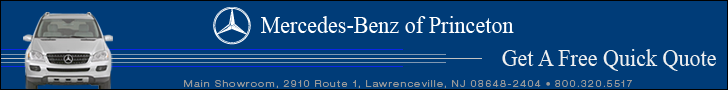
<style>
.page{position:relative;width:728px;height:90px;background:#003c78}
.page>*{position:absolute;margin:0}
.t1{font:24px "TimesNewRomanPSMT";letter-spacing:0.01em;color:#ffffff;scale:0.9 1}
.t2{font:24px "TimesNewRomanPSMT";letter-spacing:0.01em;color:#efefef;scale:0.9 1}
.t3{font:9px "HelveticaNeue-LightExt";letter-spacing:0.15em;color:#999999}
.t4{font:7.2px "TimesNewRomanPSMT";letter-spacing:0.15em;color:#999999}
</style>
<div class="page">
<p class="t1" style="left:261px;top:16px;width:253px;height:17px">Mercedes-Benz of Princeton</p>
<p class="t2" style="left:502px;top:49px;width:214px;height:22px">Get A Free Quick Quote</p>
<p class="t3" style="left:184px;top:80px;width:448px;height:9px">Main Showroom, 2910 Route 1, Lawrenceville, NJ 08648-2404 <span class="t4">● </span>800.320.5517</p>
</div>
